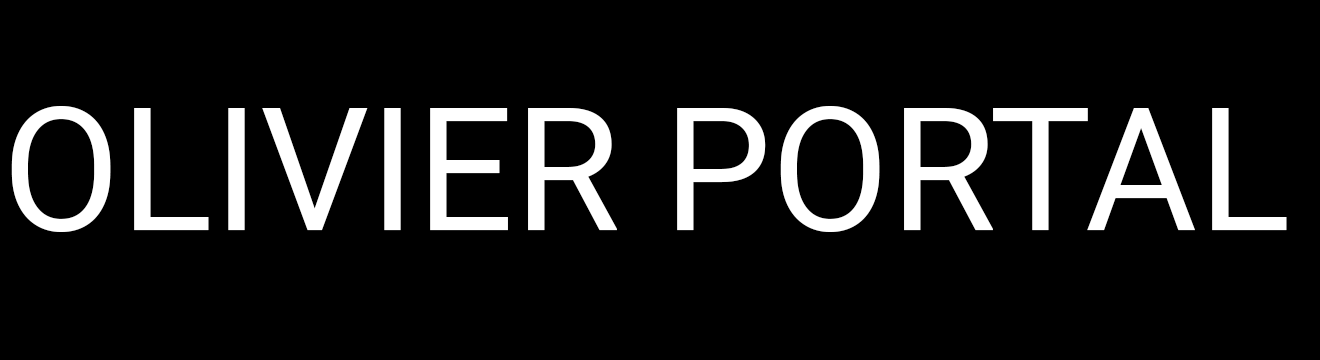
<style>
.page{position:relative;width:1320px;height:360px;background:#000000}
.page>*{position:absolute;margin:0}
.t1{font:172.2px "Roboto-Regular";color:#ffffff}
</style>
<div class="page">
<p class="t1" style="left:11px;top:106px;width:1276px;height:126px">OLIVIER PORTAL</p>
</div>
